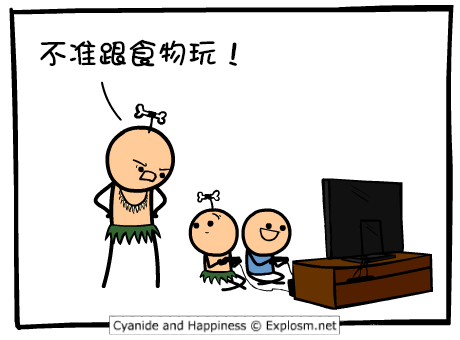
<style>
.page{position:relative;width:460px;height:340px;background:#ffffff}
.page>*{position:absolute;margin:0}
.t1{font:30px "DFGirl-W7-HKP-BF";color:#000000}
</style>
<div class="page">
<p class="t1" style="left:40px;top:39px;width:197px;height:28px">不准跟食物玩！</p>
</div>
